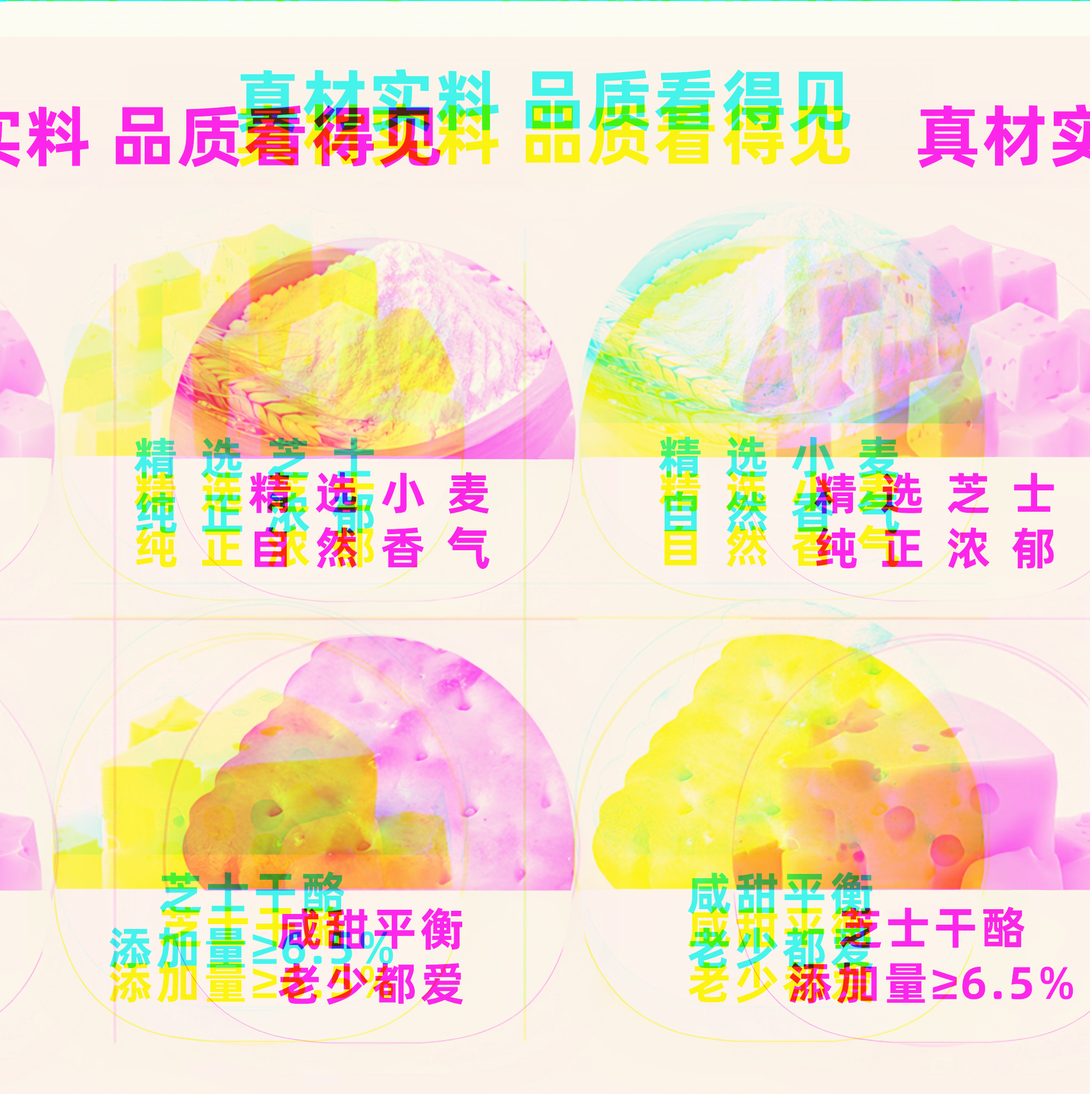
<style>
.page{position:relative;width:1090px;height:1094px}
.page>*{position:absolute;margin:0}
.t1{font:68.1px "AlibabaPuHuiTi-Bold"}
.t2{font:45.7px "AlibabaPuHuiTi-Bold";letter-spacing:0.46em}
.t3{font:45.7px "AlibabaPuHuiTi-Bold";letter-spacing:0.06em}
</style>
<div class="page">
<p class="t1" style="left:238px;top:68px;width:613px;height:64px">真材实料 品质看得见</p>
<p class="t2" style="left:134px;top:436px;width:240px;height:96px;text-align:center">精选芝士<br>纯正浓郁</p>
<p class="t2" style="left:659px;top:435px;width:241px;height:97px;text-align:center">精选小麦<br>自然香气</p>
<p class="t3" style="left:109px;top:870px;width:284px;height:97px;text-align:center">芝士干酪<br>添加量≥6.5%</p>
<p class="t3" style="left:688px;top:870px;width:186px;height:98px;text-align:center">咸甜平衡<br>老少都爱</p>
</div>
